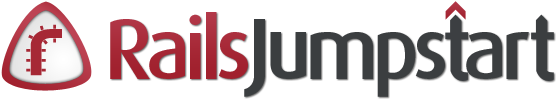
<style>
.page{position:relative;width:559px;height:100px;background:#ffffff}
.page>*{position:absolute;margin:0}
.t1{font:85.7px "Dax-Medium";letter-spacing:-0.075em;color:#a52734}
.t2{font:85.7px "Dax-Medium";letter-spacing:-0.075em;color:#3b3e40}
.t3{font:85.7px "Dax-Medium";letter-spacing:-0.04em;color:#3b3e40}
</style>
<div class="page">
<p class="t1" style="left:110px;top:12px;width:138px;height:67px">Rails</p>
<p class="t2" style="left:244px;top:19px;width:285px;height:78px">Jumps  a<span class="t3">r</span></p>
</div>
